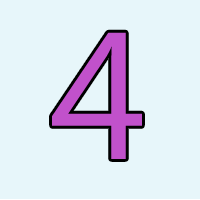
<style>
.page{position:relative;width:200px;height:200px;background:#e7f6fa}
.page>*{position:absolute;margin:0}
.t1{font:180px "MicrosoftPhagsPa";color:#c151cb}
</style>
<div class="page">
<p class="t1" style="left:52px;top:32px;width:90px;height:127px">4</p>
</div>
